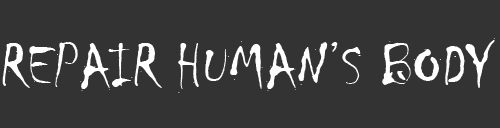
<style>
.page{position:relative;width:500px;height:128px;background:#333333}
.page>*{position:absolute;margin:0}
.t1{font:62.7px "Chiller-Regular";color:#ffffff}
</style>
<div class="page">
<p class="t1" style="left:2px;top:38px;width:493px;height:55px">REPAIR HUMAN’S BODY</p>
</div>
